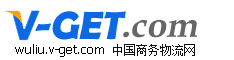
<style>
.page{position:relative;width:234px;height:60px;background:#ffffff}
.page>*{position:absolute;margin:0}
.t1{font:39.8px "BerlinSansFBDemi-Bold";letter-spacing:-0.005em;color:#0c68e3;font-style:italic}
.t2{font:35.8px "BookAntiqua-Bold";letter-spacing:-0.005em;color:#666666;font-style:italic}
.t3{font:12.9px "Tahoma";letter-spacing:-0.005em;color:#000000}
.t4{font:11.9px "SimSun";letter-spacing:-0.005em;color:#111111}
</style>
<div class="page">
<p class="t1" style="left:35px;top:11px;width:91px;height:29px">-GET</p>
<p class="t2" style="left:123px;top:20px;width:74px;height:18px">.com</p>
<p class="t3" style="left:15px;top:44px;width:89px;height:13px">wuliu.v-get.com</p>
<p class="t4" style="left:113px;top:44px;width:82px;height:12px">中国商务物流网</p>
</div>
